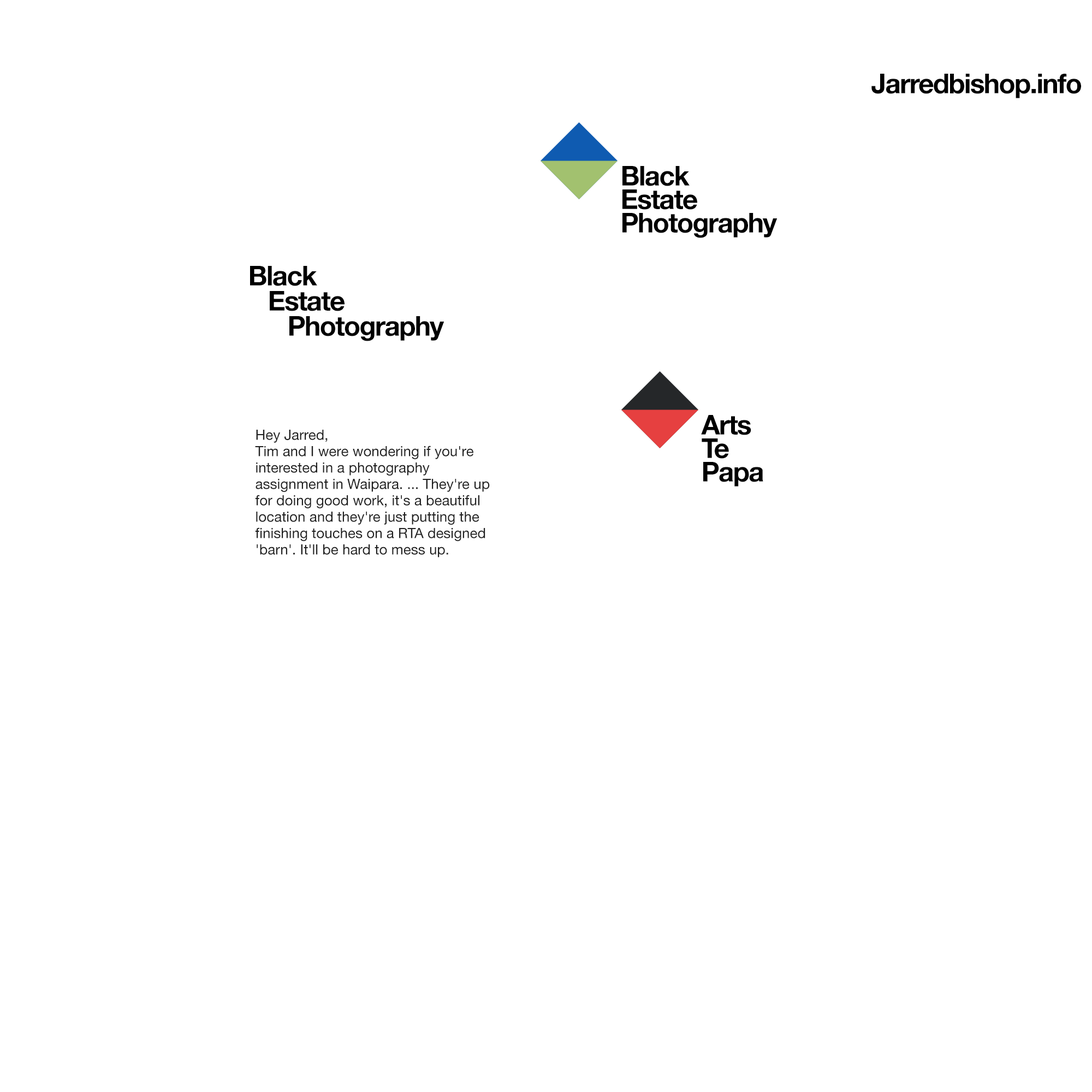
<style>
.page{position:relative;width:1092px;height:1092px;background:#ffffff}
.page>*{position:absolute;margin:0}
.t1{font:27.3px "HelveticaNeue-Bold";letter-spacing:-0.04em;color:#000000}
.t2{font:27.3px/23.5px "HelveticaNeue-Bold";letter-spacing:-0.04em;color:#000000}
.t3{font:27.3px/25.1px "HelveticaNeue-Bold";letter-spacing:-0.04em;color:#000000}
.t4{font:14.2px/16.4px "HelveticaNeue";color:#212121}
</style>
<div class="page">
<p class="t1" style="left:871px;top:74px;width:210px;height:24px">Jarredbishop.info</p>
<p class="t2" style="left:622px;top:166px;width:155px;height:72px">Black<br>Estate<br>Photography</p>
<p class="t3" style="left:250px;top:266px;width:194px;height:75px">Black<br> Estate<br>  Photography</p>
<p class="t2" style="left:701px;top:415px;width:62px;height:71px">Arts<br>Te<br>Papa</p>
<p class="t4" style="left:255px;top:430px;width:235px;height:127px">Hey Jarred,  <br>Tim and I were wondering if you're interested in a photography assignment in Waipara. ... They're up for doing good work, it's a beautiful location and they're just putting the finishing touches on a RTA designed 'barn'. It'll be hard to mess up.</p>
</div>
